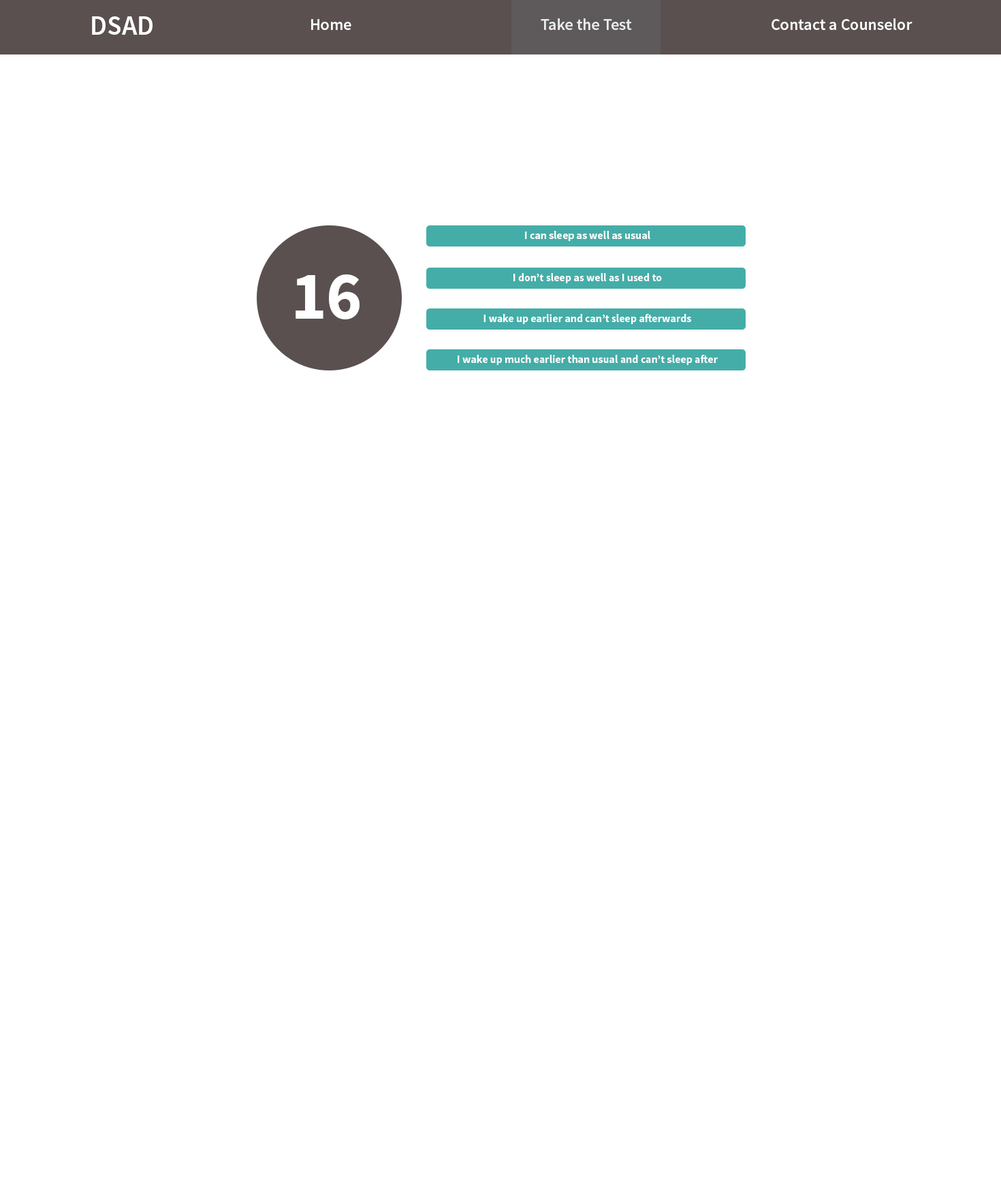
<style>
.page{position:relative;width:1001px;height:1191px;background:#ffffff}
.page>*{position:absolute;margin:0}
.t1{font:27.2px "SourceSansPro-Semibold";color:#ffffff}
.t2{font:16.3px "SourceSansPro-Semibold";color:#ffffff}
.t3{font:10.9px "SourceSansPro-Bold";color:#ffffff}
.t4{font:68.1px "SourceSansPro-Bold";color:#ffffff}
</style>
<div class="page">
<p class="t1" style="left:92px;top:16px;width:61px;height:19px">DSAD</p>
<p class="t2" style="left:311px;top:19px;width:40px;height:11px">Home</p>
<p class="t2" style="left:541px;top:18px;width:91px;height:12px">Take the Test</p>
<p class="t2" style="left:772px;top:18px;width:141px;height:12px">Contact a Counselor</p>
<p class="t3" style="left:525px;top:231px;width:125px;height:10px">I can sleep as well as usual</p>
<p class="t4" style="left:296px;top:274px;width:64px;height:45px">16</p>
<p class="t3" style="left:513px;top:273px;width:149px;height:10px">I don’t sleep as well as I used to</p>
<p class="t3" style="left:484px;top:314px;width:207px;height:10px">I wake up earlier and can’t sleep afterwards</p>
<p class="t3" style="left:458px;top:355px;width:260px;height:10px">I wake up much earlier than usual and can’t sleep after</p>
</div>
